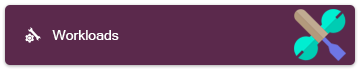
<style>
.page{position:relative;width:360px;height:70px;background:#5b294c}
.page>*{position:absolute;margin:0}
.t1{font:14px "MicrosoftSansSerif";color:#ffffff}
</style>
<div class="page">
<p class="t1" style="left:52px;top:30px;width:67px;height:10px">Workloads</p>
</div>
